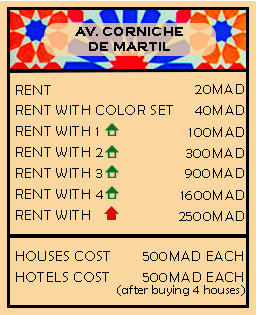
<style>
.page{position:relative;width:256px;height:315px;background:#fcd7a0}
.page>*{position:absolute;margin:0}
.t1{font:12.5px "CopperplateGothic-Bold";letter-spacing:0.025em;color:#000000}
.t2{font:14.6px/20.8px "BerlinSansFB-Reg";letter-spacing:0.025em;color:#000000}
.t3{font:14.6px "BerlinSansFB-Reg";letter-spacing:0.025em;color:#000000}
.t4{font:12.5px "BerlinSansFB-Reg";letter-spacing:0.025em;color:#000000}
</style>
<div class="page">
<p class="t1" style="left:75px;top:27px;width:108px;height:24px;text-align:center">AV. CORNICHE <br>DE MARTIL</p>
<p class="t2" style="left:16px;top:85px;width:157px;height:197px">RENT                                <br>RENT WITH COLOR SET    <br>RENT WITH 1                    <br>RENT WITH 2                   <br>RENT WITH 3                  <br>RENT WITH 4                 <br>RENT WITH                    <br><br>HOUSES COST      <br>HOTELS COST</p>
<p class="t3" style="left:195px;top:84px;width:49px;height:10px">20MAD</p>
<p class="t3" style="left:195px;top:105px;width:49px;height:10px">40MAD</p>
<p class="t3" style="left:189px;top:127px;width:55px;height:10px">100MAD</p>
<p class="t3" style="left:186px;top:148px;width:58px;height:10px">300MAD</p>
<p class="t3" style="left:185px;top:168px;width:59px;height:10px">900MAD</p>
<p class="t3" style="left:181px;top:190px;width:63px;height:10px">1600MAD</p>
<p class="t3" style="left:181px;top:190px;width:63px;height:10px">1600MAD</p>
<p class="t3" style="left:179px;top:211px;width:65px;height:10px">2500MAD</p>
<p class="t3" style="left:179px;top:211px;width:65px;height:10px">2500MAD</p>
<p class="t3" style="left:143px;top:251px;width:100px;height:10px">500MAD EACH</p>
<p class="t3" style="left:143px;top:272px;width:100px;height:10px">500MAD EACH</p>
<p class="t4" style="left:117px;top:285px;width:128px;height:11px">(after buying 4 houses)</p>
</div>
